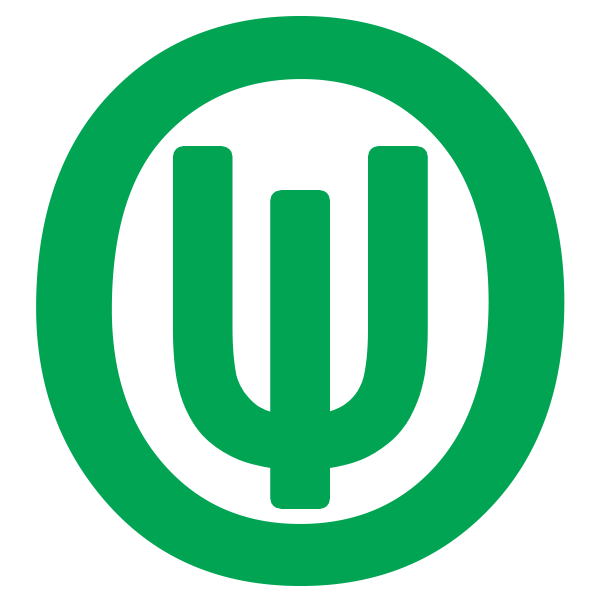
<style>
.page{position:relative;width:600px;height:600px;background:#ffffff}
.page>*{position:absolute;margin:0}
.t1{font:770.8px "ArialUnicodeMS";color:#00a453}
.t2{font:416.7px "ArialUnicodeMS";color:#00a453}
</style>
<div class="page">
<p class="t1" style="left:36px;top:16px;width:529px;height:570px">O</p>
<p class="t2" style="left:182px;top:156px;width:236px;height:304px">U</p>
</div>
